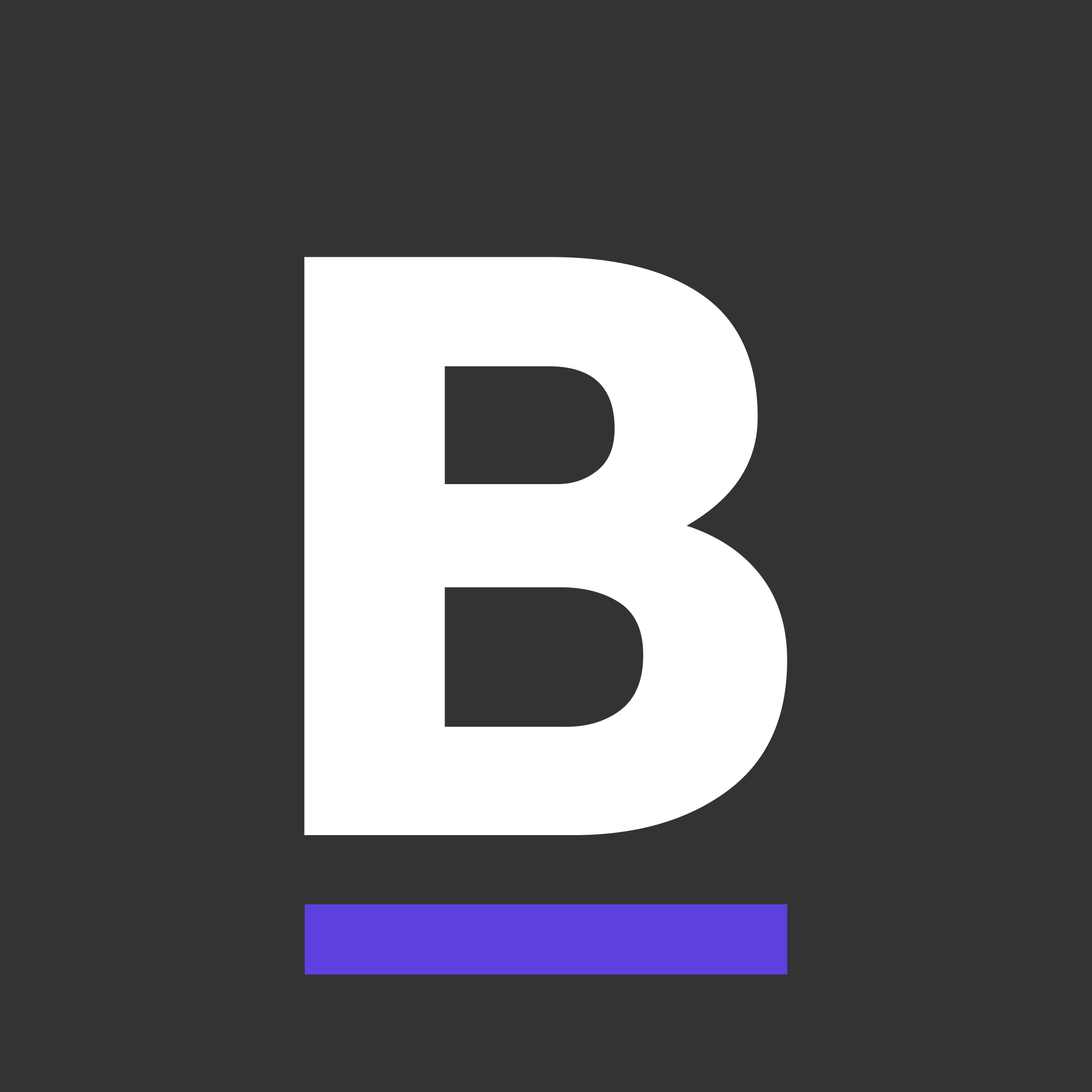
<style>
.page{position:relative;width:1092px;height:1092px;background:#333333}
.page>*{position:absolute;margin:0}
.t1{font:866.7px "MavenPro-Bold";color:#ffffff}
</style>
<div class="page">
<p class="t1" style="left:304px;top:257px;width:483px;height:578px">B</p>
</div>
